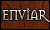
<style>
.page{position:relative;width:50px;height:30px}
.page>*{position:absolute;margin:0}
.t1{font:15.9px "Mason-Regular";letter-spacing:-0.07em;scale:0.81 1}
</style>
<div class="page">
<p class="t1" style="left:2px;top:8px;width:50px;height:14px">ENVIAR</p>
</div>
